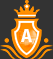
<style>
.page{position:relative;width:53px;height:59px;background:#333333}
.page>*{position:absolute;margin:0}
.t1{font:18px "MyriadHebrew-Bold";color:#ffffff}
</style>
<div class="page">
<p class="t1" style="left:21px;top:29px;width:11px;height:13px">A</p>
</div>
